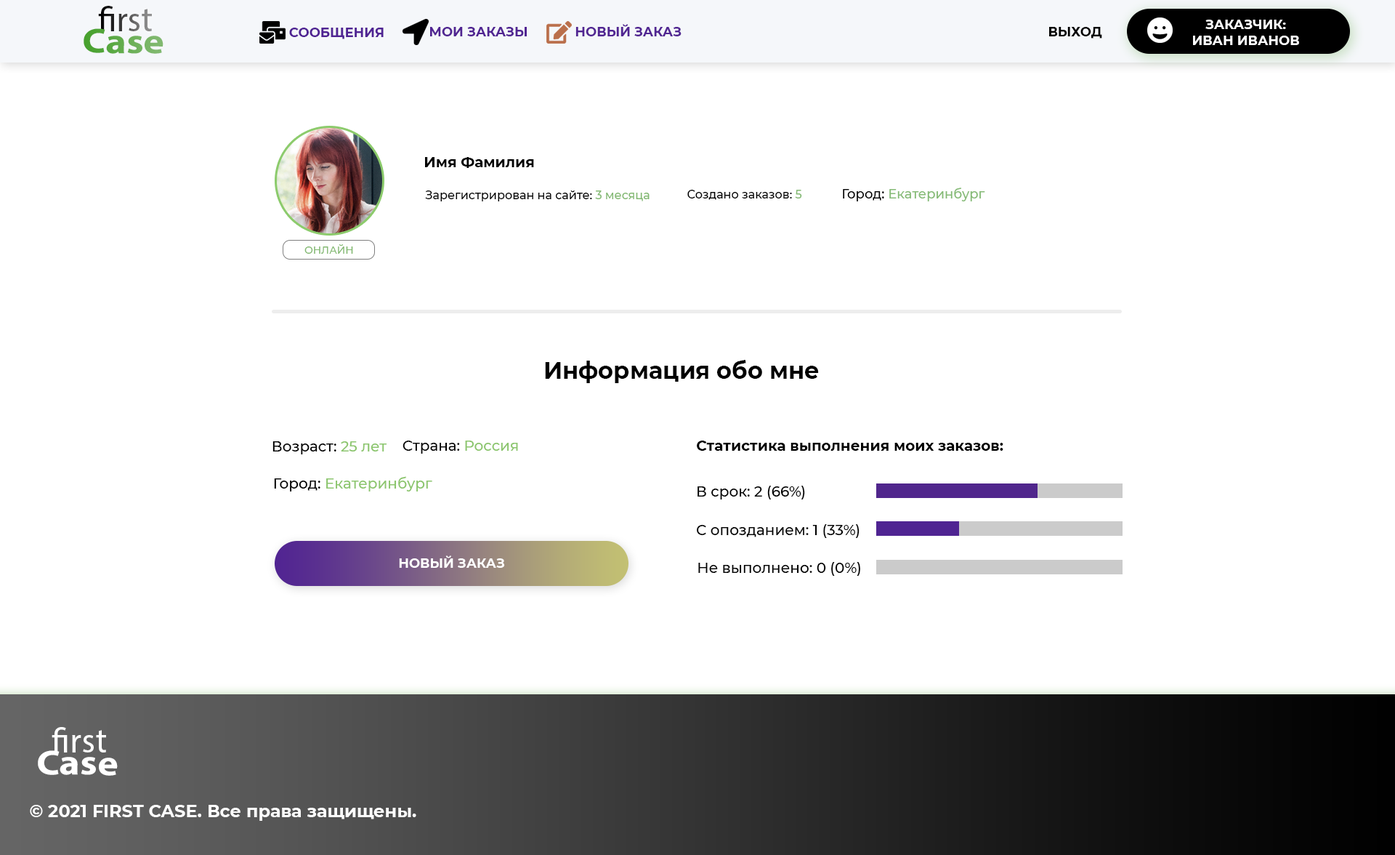
<style>
.page{position:relative;width:1395px;height:855px;background:#ffffff}
.page>*{position:absolute;margin:0}
.t1{font:34.9px "MyriadPro-Regular"}
.t2{font:34.9px "MyriadPro-Bold";scale:1.13 1}
.t3{font:34.9px "MyriadPro-Regular";scale:1.13 1}
.t4{font:13.1px "Montserrat-Bold";color:#4f2492;text-transform:uppercase}
.t5{font:13.1px "Montserrat-Bold";color:#502492;text-transform:uppercase}
.t6{font:13.1px "Montserrat-Bold";color:#512592;text-transform:uppercase}
.t7{font:13.1px "Montserrat-Bold";color:#000000;text-transform:uppercase}
.t8{font:13.1px "Montserrat-Bold";color:#ffffff;text-transform:uppercase}
.t9{font:14.5px "Montserrat-Bold";color:#000000}
.t10{font:11.6px "Montserrat-Medium";color:#000000}
.t11{font:11.6px "Montserrat-Medium";color:#82b971}
.t12{font:13.1px "Montserrat-Medium";color:#85bb76}
.t13{font:13.1px "Montserrat-Medium";color:#000000}
.t14{font:10.2px "Montserrat-Medium";color:#82b970}
.t15{font:23.3px "Montserrat-Bold";color:#000000}
.t16{font:14.5px "Montserrat-Medium";color:#000000}
.t17{font:14.5px "Montserrat-Medium";color:#8cc66e}
.t18{font:34.9px "MyriadPro-Regular";color:#ffffff}
.t19{font:34.9px "MyriadPro-Bold";color:#ffffff;scale:1.13 1}
.t20{font:34.9px "MyriadPro-Regular";color:#ffffff;scale:1.13 1}
.t21{font:17.4px "Montserrat-Bold";color:#ffffff}
</style>
<div class="page">
<p class="t1" style="left:98px;top:6px;width:54px;height:25px">first</p>
<p class="t2" style="left:84px;top:28px;width:80px;height:26px;rotate:1deg"><span class="t3">       </span>Case</p>
<p class="t4" style="left:289px;top:28px;width:95px;height:11px">СООБЩЕНИЯ</p>
<p class="t5" style="left:430px;top:27px;width:97px;height:9px">МОИ ЗАКАЗЫ</p>
<p class="t6" style="left:576px;top:24px;width:106px;height:12px">новый заказ</p>
<p class="t7" style="left:1049px;top:27px;width:53px;height:12px">ВЫХОД</p>
<p class="t8" style="left:1193px;top:20px;width:106px;height:25px;text-align:center">заказчик:<br>иВАН иВАНОВ</p>
<p class="t9" style="left:425px;top:157px;width:109px;height:11px">Имя Фамилия</p>
<p class="t10" style="left:425px;top:190px;width:225px;height:11px">Зарегистрирован на сайте: <span class="t11">3 месяца</span></p>
<p class="t10" style="left:687px;top:190px;width:115px;height:10px">Создано заказов: <span class="t11">5</span></p>
<p class="t12" style="left:843px;top:187px;width:142px;height:14px"><span class="t13">Город: </span>Екатеринбург</p>
<p class="t14" style="left:304px;top:244px;width:49px;height:10px">ОНЛАЙН</p>
<p class="t15" style="left:545px;top:360px;width:274px;height:23px">Информация обо мне</p>
<p class="t16" style="left:273px;top:441px;width:114px;height:13px">Возраст: <span class="t17">25 лет</span></p>
<p class="t16" style="left:403px;top:440px;width:115px;height:13px">Страна: <span class="t17">Россия</span></p>
<p class="t9" style="left:697px;top:440px;width:307px;height:11px">Статистика выполнения моих заказов:</p>
<p class="t17" style="left:274px;top:476px;width:158px;height:15px"><span class="t16">Город: </span>Екатеринбург</p>
<p class="t16" style="left:698px;top:485px;width:107px;height:14px">В срок: 2 (66%)</p>
<p class="t16" style="left:697px;top:524px;width:163px;height:14px">С опозданием: 1 (33%)</p>
<p class="t8" style="left:399px;top:555px;width:106px;height:13px">НОВЫЙ ЗАКАЗ</p>
<p class="t16" style="left:698px;top:562px;width:162px;height:14px">Не выполнено: 0 (0%)</p>
<p class="t18" style="left:52px;top:727px;width:54px;height:25px">first</p>
<p class="t19" style="left:38px;top:750px;width:80px;height:25px;rotate:1deg"><span class="t20">       </span>Case</p>
<p class="t21" style="left:30px;top:804px;width:386px;height:16px">© 2021 FIRST CASE. Все права защищены.</p>
</div>
